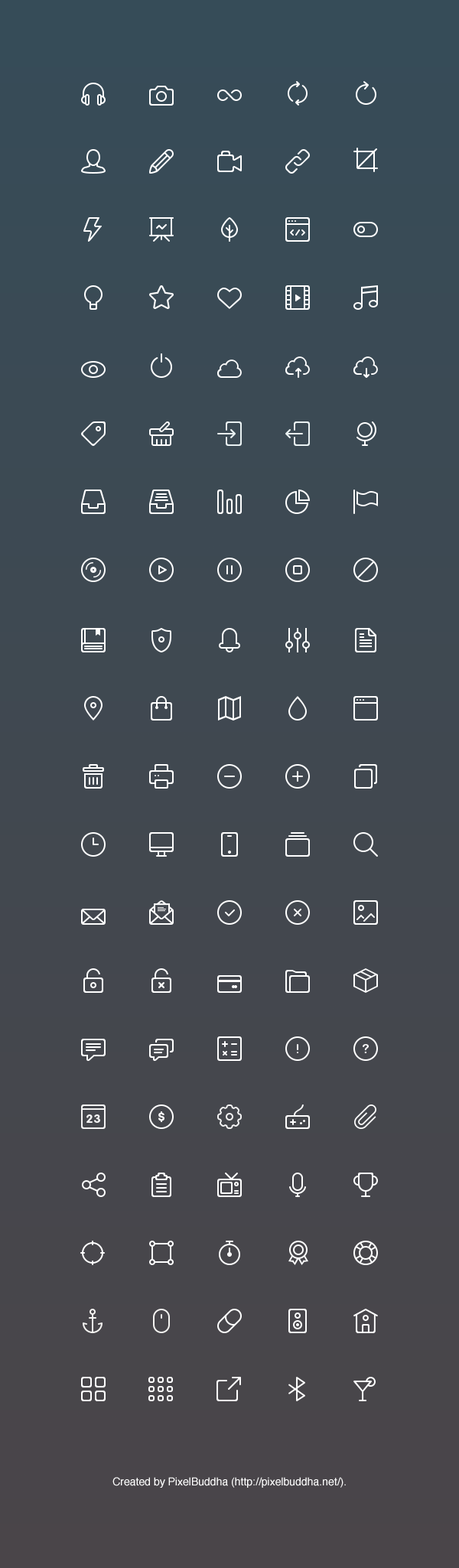
<style>
.page{position:relative;width:459px;height:1568px}
.page>*{position:absolute;margin:0}
.t1{font:10.7px "Helvetica";color:#ffffff}
</style>
<div class="page">
<p class="t1" style="left:112px;top:1477px;width:234px;height:11px">Created by PixelBuddha (http://pixelbuddha.net/).</p>
</div>
